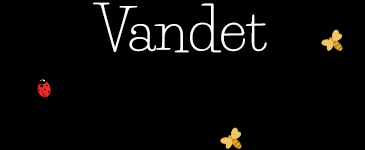
<style>
.page{position:relative;width:365px;height:150px;background:#000000}
.page>*{position:absolute;margin:0}
.t1{font:58.3px "LifeSavers-Regular";color:#ffffff}
</style>
<div class="page">
<p class="t1" style="left:93px;top:2px;width:174px;height:51px">Vandet</p>
</div>
